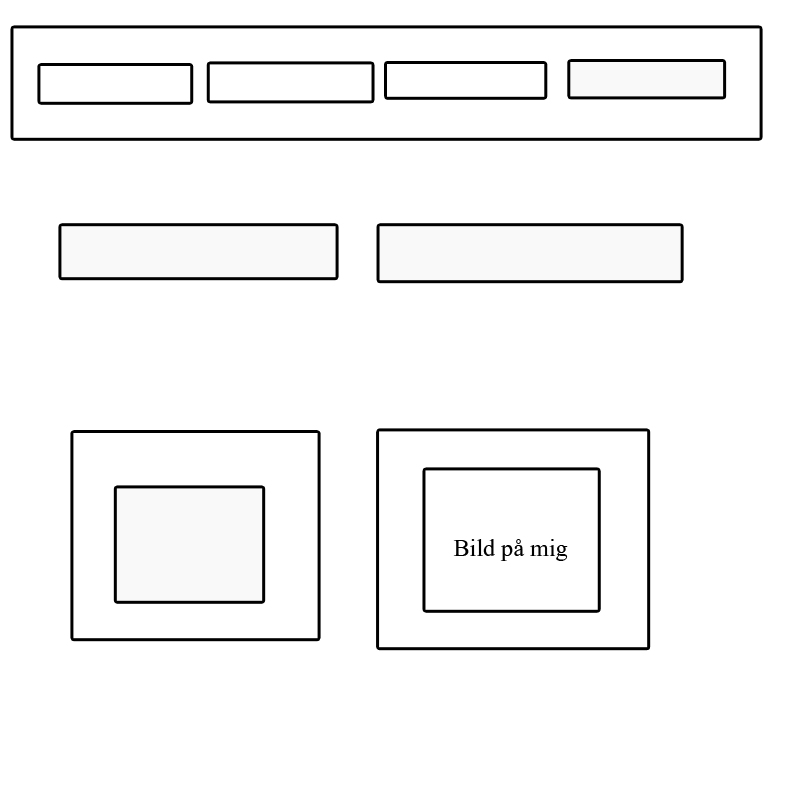
<style>
.page{position:relative;width:800px;height:800px;background:#ffffff}
.page>*{position:absolute;margin:0}
.t1{font:30px "Aparajita";color:#000000}
</style>
<div class="page">
<p class="t1" style="left:453px;top:539px;width:115px;height:22px">Bild på mig</p>
</div>
